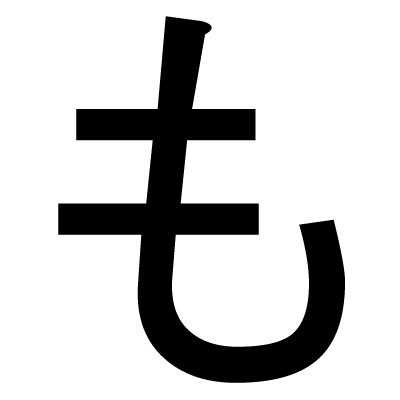
<style>
.page{position:relative;width:400px;height:400px;background:#ffffff}
.page>*{position:absolute;margin:0}
.t1{font:416.7px "MS-PGothic";color:#000000}
</style>
<div class="page">
<p class="t1" style="left:58px;top:16px;width:287px;height:367px">も</p>
</div>
